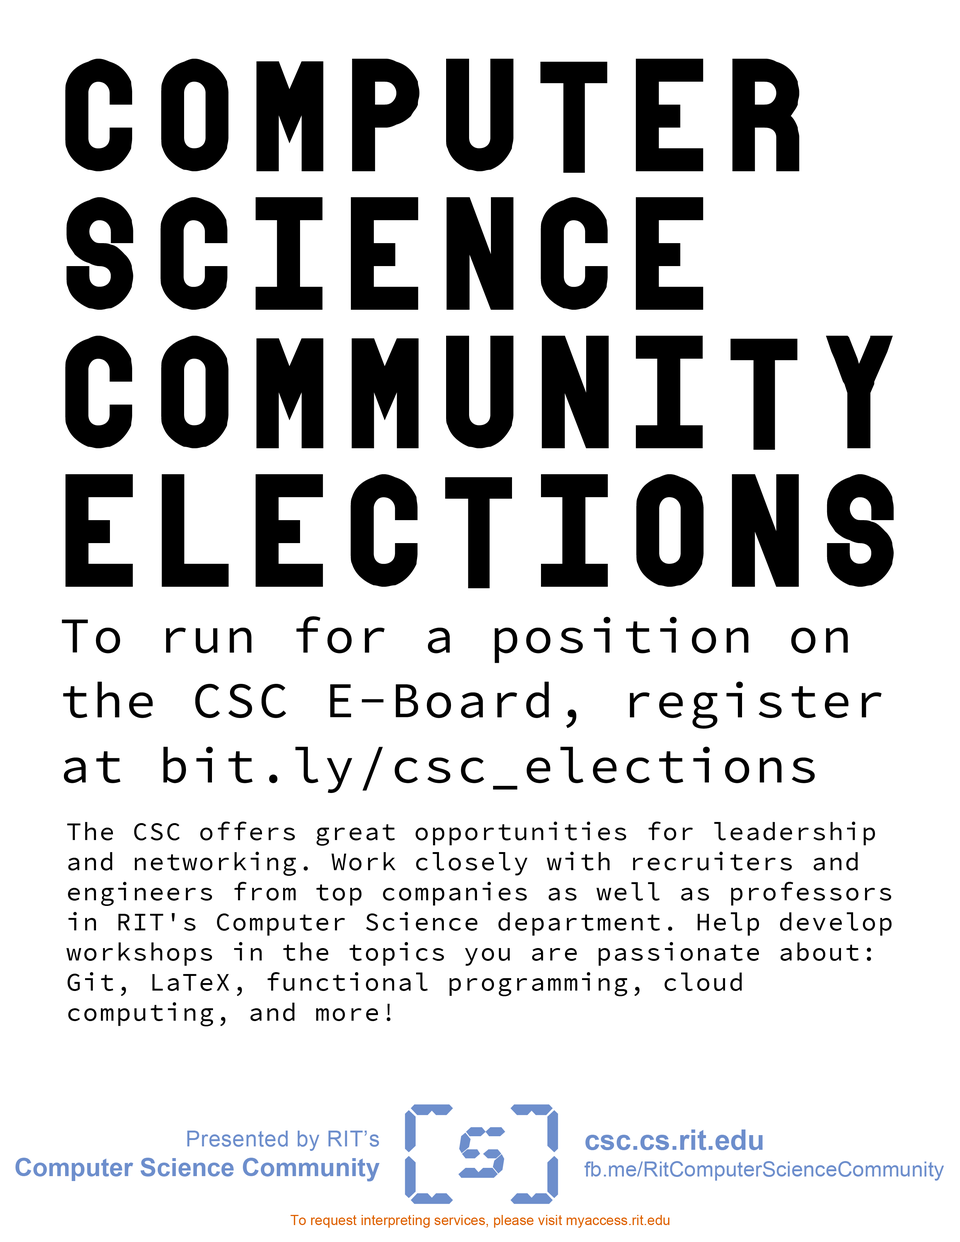
<style>
.page{position:relative;width:960px;height:1242px;background:#ffffff}
.page>*{position:absolute;margin:0}
.t1{font:169.7px/138.6px "absender";letter-spacing:0.06em;color:#000000}
.t2{font:50.2px/64.9px "SourceCodePro-Regular";letter-spacing:0.06em;color:#000000}
.t3{font:25.1px "SourceCodePro-Regular";letter-spacing:0.06em;color:#000000}
.t4{font:25.1px/29.8px "Arial-BoldMT";color:#6d8ecc}
.t5{font:22px/29.8px "ArialMT";letter-spacing:0.02em;color:#6d8ecc}
.t6{font:21.2px/26.7px "ArialMT";color:#6d8ecc}
.t7{font:28.2px/26.7px "Arial-BoldMT";color:#6d8ecc}
.t8{font:13.9px "ArialMT";color:#de6100}
</style>
<div class="page">
<p class="t1" style="left:65px;top:59px;width:829px;height:529px">computeR<br>Science<br>community<br>elections</p>
<p class="t2" style="left:62px;top:616px;width:820px;height:177px">To run for a position on the CSC E-Board, register at bit.ly/csc_elections</p>
<p class="t3" style="left:66px;top:822px;width:826px;height:205px">The CSC offers great opportunities for leadership and networking. Work closely with recruiters and engineers from top companies as well as professors in RIT's Computer Science department. Help develop workshops in the topics you are passionate about: Git, LaTeX, functional programming, cloud computing, and more!</p>
<p class="t4" style="left:15px;top:1131px;width:365px;height:51px;text-align:right"><span class="t5">Presented by RIT’s<br></span>Computer Science Community</p>
<p class="t6" style="left:584px;top:1130px;width:360px;height:51px"><span class="t7">csc.cs.rit.edu<br></span>fb.me/RitComputerScienceCommunity</p>
<p class="t8" style="left:290px;top:1215px;width:379px;height:13px">To request interpreting services, please visit myaccess.rit.edu</p>
</div>
